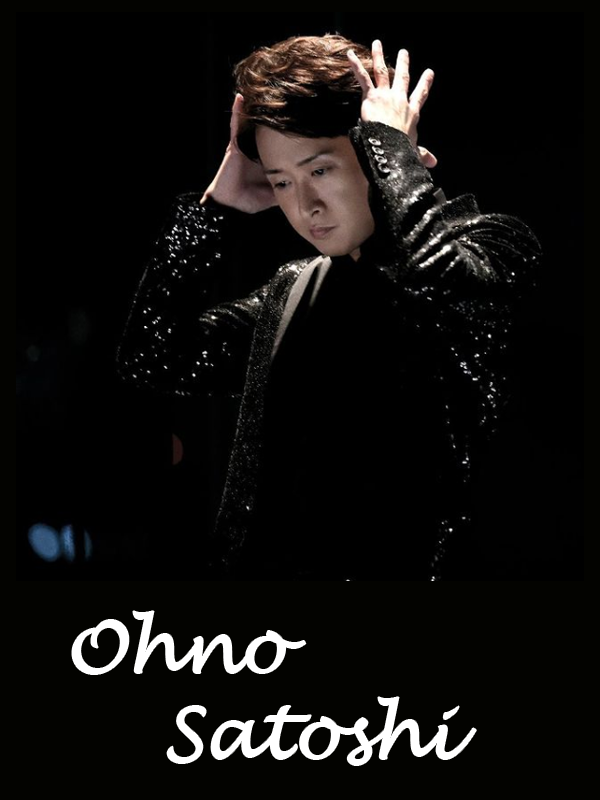
<style>
.page{position:relative;width:600px;height:800px;background:#000000}
.page>*{position:absolute;margin:0}
.t1{font:72px "LucidaHandwriting-Italic";color:#ffffff}
</style>
<div class="page">
<p class="t1" style="left:72px;top:611px;width:234px;height:63px">Ohno</p>
<p class="t1" style="left:167px;top:697px;width:309px;height:68px">Satoshi</p>
</div>
